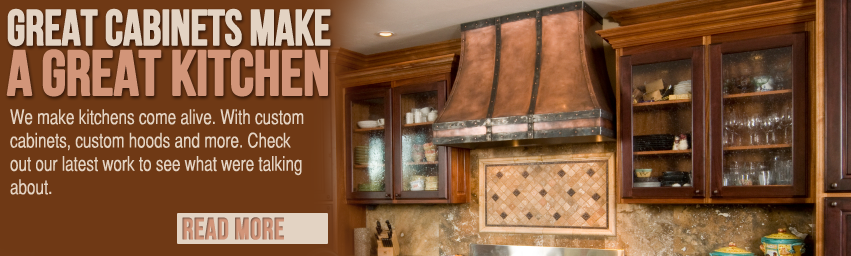
<style>
.page{position:relative;width:851px;height:256px}
.page>*{position:absolute;margin:0}
.t1{font:50px/50px "BebasNeue";letter-spacing:-0.022em;color:#e3d3c3;font-weight:bold;scale:0.93 1}
.t2{font:63.3px/50px "BebasNeue";letter-spacing:-0.024em;color:#d29579;font-weight:bold;scale:0.97 1}
.t3{font:20px/23.3px "HelveticaCYPlain";color:#e3d3c3;scale:0.93 1}
.t4{font:30px "BebasNeue";color:#d29579;font-weight:bold;scale:0.93 1}
</style>
<div class="page">
<p class="t1" style="left:6px;top:8px;width:325px;height:89px">Great Cabinets Make <br><span class="t2">A Great Kitchen</span></p>
<p class="t3" style="left:10px;top:109px;width:294px;height:86px">We make kitchens come alive. With custom <br>cabinets, custom hoods and more. Check <br>out our latest work to see what were talking <br>about.</p>
<p class="t4" style="left:182px;top:217px;width:102px;height:23px">Read More</p>
</div>
